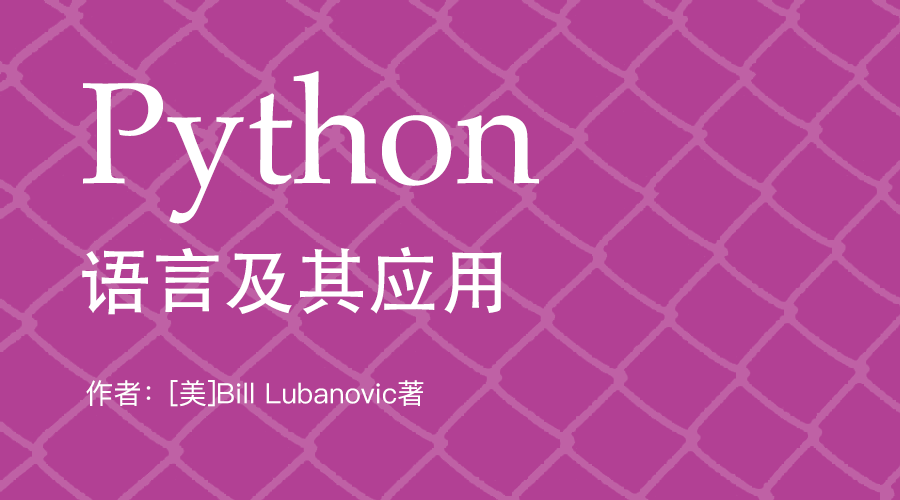
<style>
.page{position:relative;width:900px;height:500px;background:#b24094}
.page>*{position:absolute;margin:0}
.t1{font:144px "Palatino-Roman";color:#ffffff}
.t2{font:72px "AdobeHeitiStd-Regular";color:#ffffff}
.t3{font:28px "PingFangSC-Regular";color:#ffffff}
</style>
<div class="page">
<p class="t1" style="left:83px;top:71px;width:456px;height:153px">Python</p>
<p class="t2" style="left:82px;top:246px;width:420px;height:69px">语言及其应用</p>
<p class="t3" style="left:86px;top:380px;width:338px;height:27px">作者：[美]Bill Lubanovic著</p>
</div>
